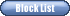
<style>
.page{position:relative;width:70px;height:16px}
.page>*{position:absolute;margin:0}
.t1{font:10px "Impact";color:#ffffff}
</style>
<div class="page">
<p class="t1" style="left:16px;top:4px;width:39px;height:8px">Block List</p>
</div>
